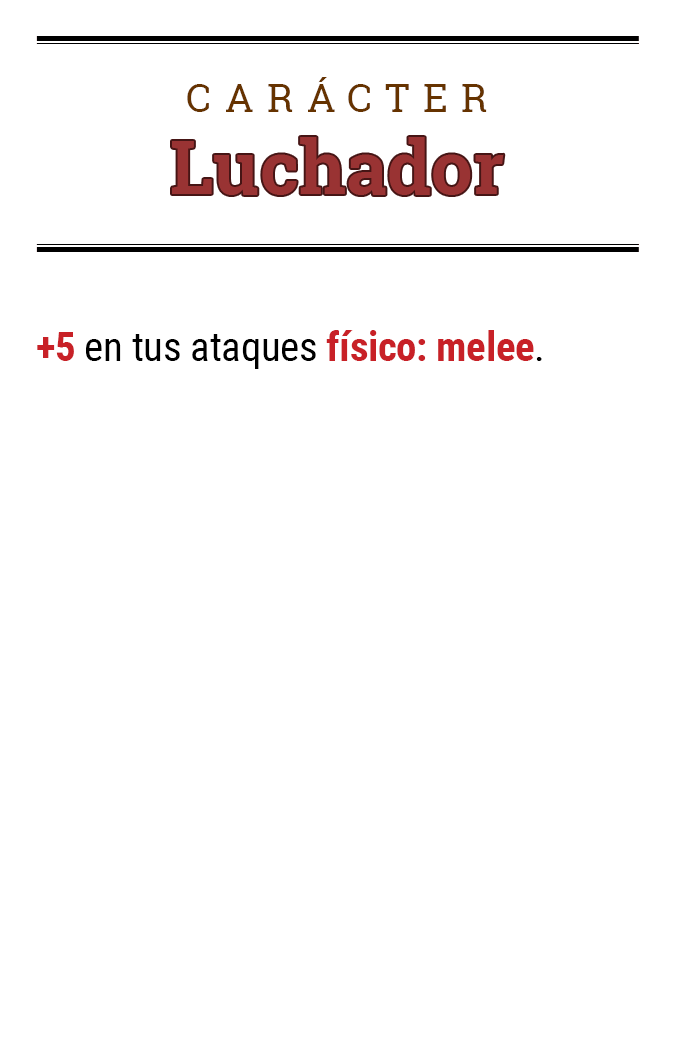
<style>
.page{position:relative;width:675px;height:1050px;background:#ffffff}
.page>*{position:absolute;margin:0}
.t1{font:39.2px "RobotoSlab-Regular";letter-spacing:0.34em;color:#663300}
.t2{font:74.5px "RobotoSlab-Bold";color:#993333}
.t3{font:41.1px "RobotoCondensed-Regular";letter-spacing:-0.01em;color:#000000}
.t4{font:41.1px "RobotoCondensed-Bold";letter-spacing:-0.01em;color:#c82127}
</style>
<div class="page">
<p class="t1" style="left:187px;top:77px;width:300px;height:35px">CARÁCTER</p>
<p class="t2" style="left:172px;top:137px;width:332px;height:58px">Luchador</p>
<p class="t3" style="left:37px;top:330px;width:505px;height:39px"><span class="t4">+5</span> en tus ataques <span class="t4">físico: melee</span>.</p>
</div>
